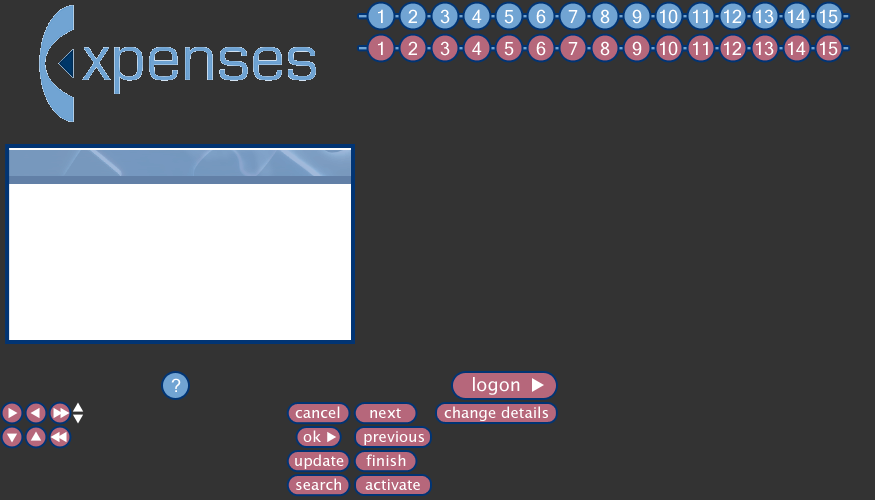
<style>
.page{position:relative;width:875px;height:500px;background:#333333}
.page>*{position:absolute;margin:0}
.t1{font:18px "MicrosoftSansSerif";color:#ffffff}
.t2{font:18px "LucidaSansUnicode";color:#ffffff}
.t3{font:15px "LucidaSansUnicode";color:#ffffff}
</style>
<div class="page">
<p class="t1" style="left:378px;top:9px;width:5px;height:14px">1</p>
<p class="t1" style="left:408px;top:9px;width:9px;height:14px">2</p>
<p class="t1" style="left:440px;top:9px;width:10px;height:15px">3</p>
<p class="t1" style="left:472px;top:9px;width:10px;height:14px">4</p>
<p class="t1" style="left:504px;top:10px;width:10px;height:14px">5</p>
<p class="t1" style="left:536px;top:9px;width:10px;height:15px">6</p>
<p class="t1" style="left:568px;top:10px;width:10px;height:13px">7</p>
<p class="t1" style="left:600px;top:9px;width:10px;height:15px">8</p>
<p class="t1" style="left:632px;top:9px;width:10px;height:15px">9</p>
<p class="t1" style="left:660px;top:9px;width:18px;height:15px">10</p>
<p class="t1" style="left:693px;top:9px;width:15px;height:14px">11</p>
<p class="t1" style="left:724px;top:9px;width:17px;height:14px">12</p>
<p class="t1" style="left:756px;top:9px;width:18px;height:15px">13</p>
<p class="t1" style="left:788px;top:9px;width:18px;height:14px">14</p>
<p class="t1" style="left:820px;top:9px;width:18px;height:15px">15</p>
<p class="t1" style="left:378px;top:41px;width:5px;height:14px">1</p>
<p class="t1" style="left:408px;top:41px;width:9px;height:14px">2</p>
<p class="t1" style="left:440px;top:41px;width:10px;height:15px">3</p>
<p class="t1" style="left:472px;top:41px;width:10px;height:14px">4</p>
<p class="t1" style="left:536px;top:41px;width:10px;height:15px">6</p>
<p class="t1" style="left:600px;top:41px;width:10px;height:15px">8</p>
<p class="t1" style="left:632px;top:41px;width:10px;height:15px">9</p>
<p class="t1" style="left:660px;top:41px;width:18px;height:15px">10</p>
<p class="t1" style="left:693px;top:41px;width:15px;height:14px">11</p>
<p class="t1" style="left:724px;top:41px;width:17px;height:14px">12</p>
<p class="t1" style="left:756px;top:41px;width:18px;height:15px">13</p>
<p class="t1" style="left:788px;top:41px;width:18px;height:14px">14</p>
<p class="t1" style="left:820px;top:41px;width:18px;height:15px">15</p>
<p class="t1" style="left:504px;top:42px;width:10px;height:14px">5</p>
<p class="t1" style="left:568px;top:42px;width:10px;height:13px">7</p>
<p class="t2" style="left:473px;top:377px;width:47px;height:18px">logon</p>
<p class="t1" style="left:171px;top:378px;width:10px;height:14px">?</p>
<p class="t3" style="left:295px;top:406px;width:45px;height:12px">cancel</p>
<p class="t3" style="left:370px;top:408px;width:31px;height:10px">next</p>
<p class="t3" style="left:444px;top:406px;width:104px;height:15px">change details</p>
<p class="t3" style="left:303px;top:430px;width:18px;height:12px">ok</p>
<p class="t3" style="left:364px;top:431px;width:60px;height:14px">previous</p>
<p class="t3" style="left:295px;top:454px;width:49px;height:15px">update</p>
<p class="t3" style="left:366px;top:454px;width:40px;height:12px">finish</p>
<p class="t3" style="left:296px;top:478px;width:45px;height:12px">search</p>
<p class="t3" style="left:365px;top:479px;width:55px;height:11px">activate</p>
</div>
